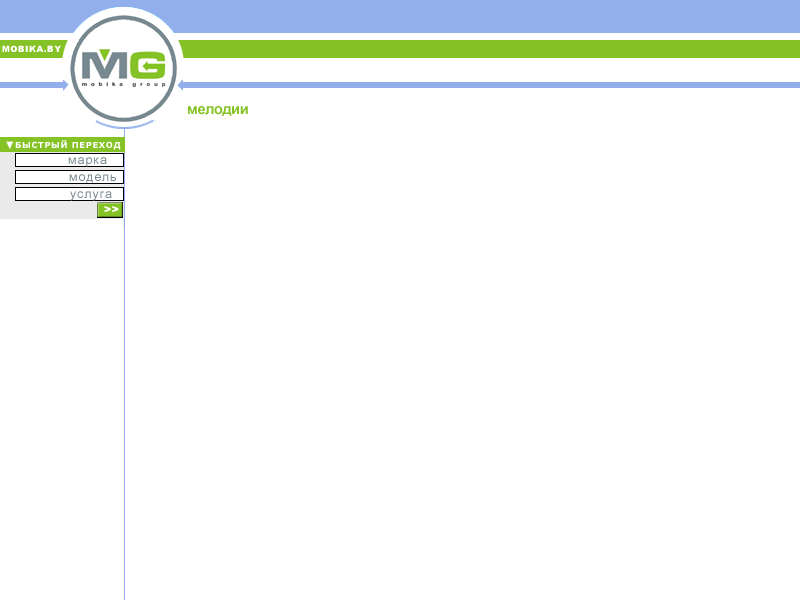
<style>
.page{position:relative;width:800px;height:600px;background:#ffffff}
.page>*{position:absolute;margin:0}
.t1{font:8.3px "Arial-Black";letter-spacing:0.075em;color:#ffffff}
.t2{font:14.6px "Arial-BoldMT";letter-spacing:-0.025em;color:#85c226}
.t3{font:8.3px "Verdana-Bold";letter-spacing:0.075em;color:#ffffff}
.t4{font:12.5px "ArialMT";letter-spacing:0.075em;color:#788992}
.t5{font:10.4px "Arial-Black";letter-spacing:0.075em;color:#ffffff}
</style>
<div class="page">
<p class="t1" style="left:2px;top:45px;width:59px;height:7px">MOBIKA.BY</p>
<p class="t2" style="left:188px;top:106px;width:60px;height:10px">мелодии</p>
<p class="t3" style="left:15px;top:140px;width:106px;height:10px">БЫСТРЫЙ ПЕРЕХОД</p>
<p class="t4" style="left:69px;top:174px;width:47px;height:9px">модель</p>
<p class="t5" style="left:104px;top:206px;width:15px;height:7px">&gt;&gt;</p>
</div>
